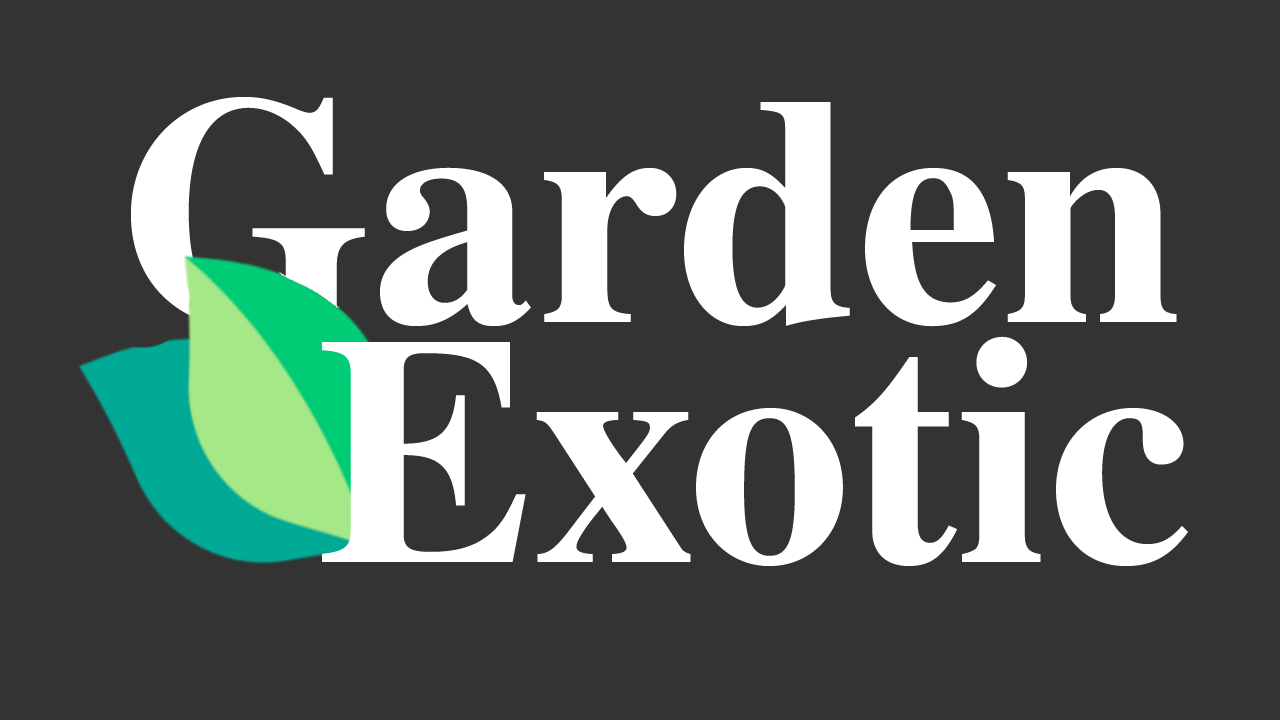
<style>
.page{position:relative;width:1280px;height:720px;background:#333333}
.page>*{position:absolute;margin:0}
.t1{font:325.2px "STIXGeneral-Bold";color:#ffffff}
</style>
<div class="page">
<p class="t1" style="left:131px;top:97px;width:1046px;height:231px">Garden</p>
<p class="t1" style="left:322px;top:336px;width:866px;height:230px">Exotic</p>
</div>
